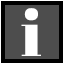
<style>
.page{position:relative;width:64px;height:64px;background:#4d4d4d}
.page>*{position:absolute;margin:0}
.t1{font:65.6px "AbrilFatface-Regular";letter-spacing:0.02em;color:#ffffff}
</style>
<div class="page">
<p class="t1" style="left:21px;top:8px;width:20px;height:48px">i</p>
</div>
